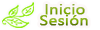
<style>
.page{position:relative;width:100px;height:30px;background:#ffffff}
.page>*{position:absolute;margin:0}
.t1{font:14px/11.5px "NirmalaUI";font-weight:bold;scale:1.17 1}
</style>
<div class="page">
<p class="t1" style="left:40px;top:4px;width:48px;height:22px">Inicio<br>Sesión</p>
</div>
